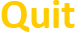
<style>
.page{position:relative;width:76px;height:32px;background:#ffffff}
.page>*{position:absolute;margin:0}
.t1{font:41.7px "Calibri-Bold";color:#ffcc00}
</style>
<div class="page">
<p class="t1" style="left:1px;top:0px;width:74px;height:32px">Quit</p>
</div>
